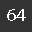
<style>
.page{position:relative;width:32px;height:32px;background:#333333}
.page>*{position:absolute;margin:0}
.t1{font:17.8px "MyriadPro-Regular";color:#ffffff;scale:1.12 1}
</style>
<div class="page">
<p class="t1" style="left:7px;top:9px;width:19px;height:12px">64</p>
</div>
